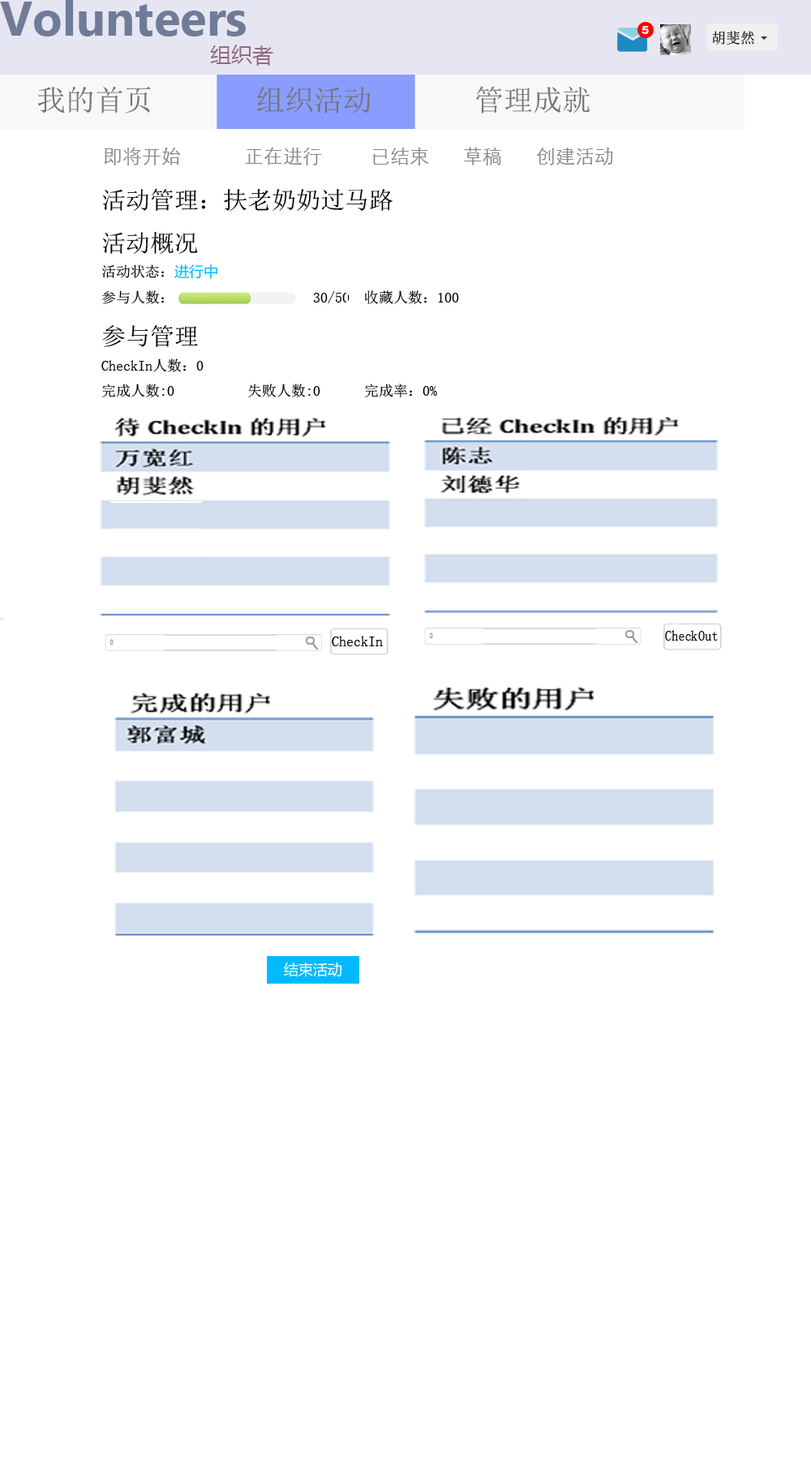
<style>
.page{position:relative;width:811px;height:1471px;background:#ffffff}
.page>*{position:absolute;margin:0}
.t1{font:11.4px "Arial-Black";color:#ffffff}
.t2{font:14.6px "SimSun";color:#141414}
.t3{font:21.1px "MicrosoftYaHei";color:#926c82}
.t4{font:29.2px "SimSun";color:#717273}
.t5{font:19.5px "STXihei";color:#878787}
.t6{font:19.5px "STXihei";color:#33aafd}
.t7{font:14.3px "SimSun";color:#000000}
.t8{font:23.8px "SimSun";color:#000000}
.t9{font:14.3px "MicrosoftYaHei";color:#00baff}
.t10{font:14.3px "SimSun";color:#000000;scale:0.93 1}
.t11{font:14.3px "MicrosoftYaHei";color:#ffffff}
</style>
<div class="page">
<p class="t1" style="left:641px;top:26px;width:8px;height:8px">5</p>
<p class="t2" style="left:712px;top:31px;width:42px;height:14px">胡斐然</p>
<p class="t3" style="left:210px;top:45px;width:63px;height:21px">组织者</p>
<p class="t4" style="left:37px;top:86px;width:553px;height:28px">我的首页       组织活动       管理成就</p>
<p class="t5" style="left:104px;top:147px;width:509px;height:18px"><span class="t6">        </span>即将开始             正在进行          已结束       草稿       创建活动</p>
<p class="t7" style="left:101px;top:188px;width:358px;height:209px"><span class="t8">活动管理：扶老奶奶过马路<br>活动概况<br></span>活动状态：<span class="t9">进行中              <br></span>参与人数：                   30/50  收藏人数：100<br><span class="t8">参与管理<br></span>CheckIn人数：0          <br>完成人数:0          失败人数:0      完成率：0%</p>
<p class="t10" style="left:665px;top:630px;width:53px;height:11px">CheckOut</p>
<p class="t7" style="left:332px;top:636px;width:51px;height:10px">CheckIn</p>
<p class="t11" style="left:284px;top:962px;width:58px;height:15px">结束活动</p>
</div>
